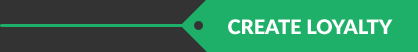
<style>
.page{position:relative;width:418px;height:52px;background:#1eb069}
.page>*{position:absolute;margin:0}
.t1{font:20px "Lato-Black";color:#ffffff}
</style>
<div class="page">
<p class="t1" style="left:228px;top:19px;width:165px;height:16px">CREATE LOYALTY</p>
</div>
